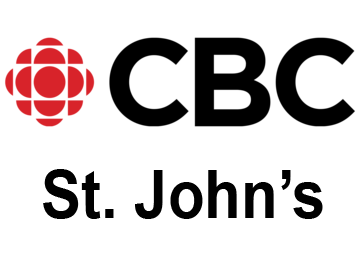
<style>
.page{position:relative;width:360px;height:270px;background:#ffffff}
.page>*{position:absolute;margin:0}
.t1{font:66px "Arial-BoldMT";color:#000000;scale:0.91 1}
</style>
<div class="page">
<p class="t1" style="left:43px;top:169px;width:280px;height:50px">St. John’s</p>
</div>
